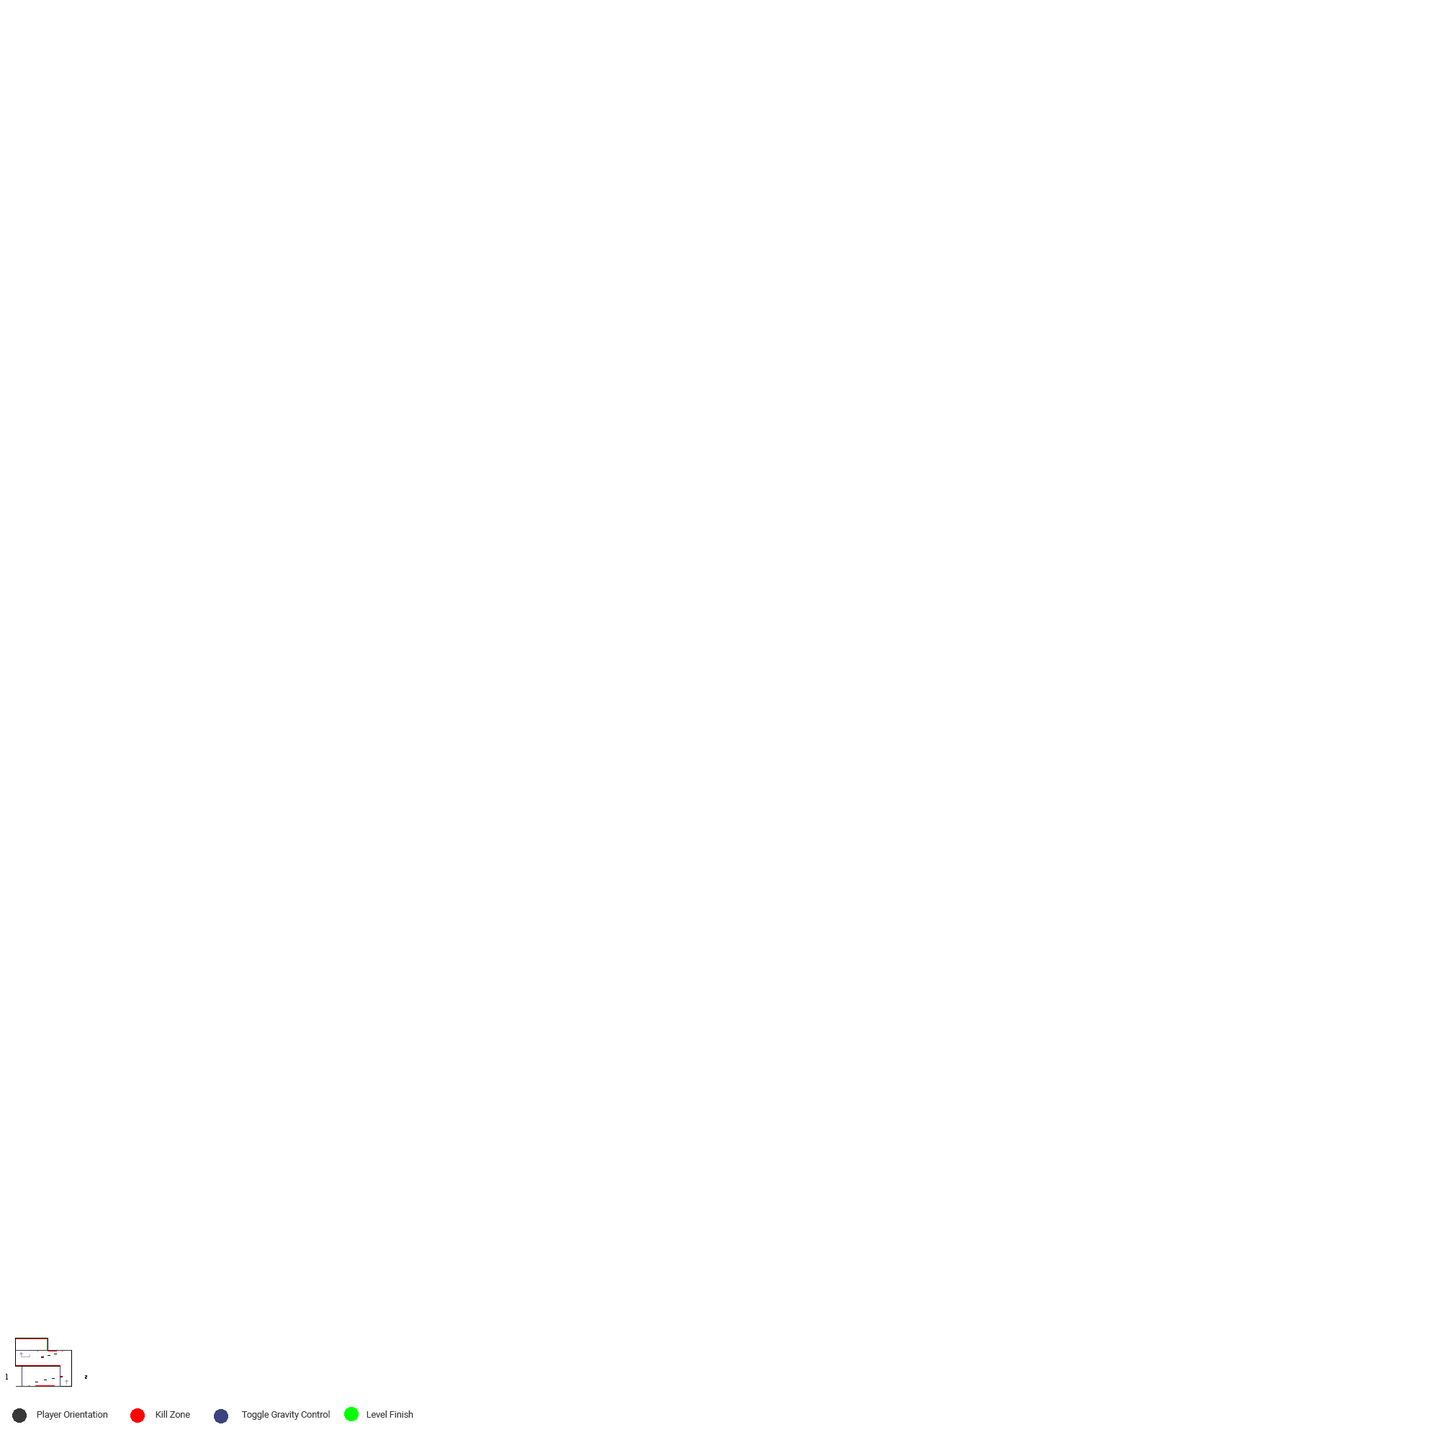
<style>
.page{position:relative;width:1440px;height:1440px;background:#ffffff}
.page>*{position:absolute;margin:0}
.t1{font:9px "Roboto-Regular";color:#383838}
</style>
<div class="page">
<p class="t1" style="left:37px;top:1410px;width:71px;height:10px">Player Orientation</p>
<p class="t1" style="left:156px;top:1410px;width:34px;height:8px">Kill Zone</p>
<p class="t1" style="left:241px;top:1410px;width:89px;height:10px">Toggle Gravity Control</p>
<p class="t1" style="left:366px;top:1410px;width:47px;height:8px">Level Finish</p>
</div>
